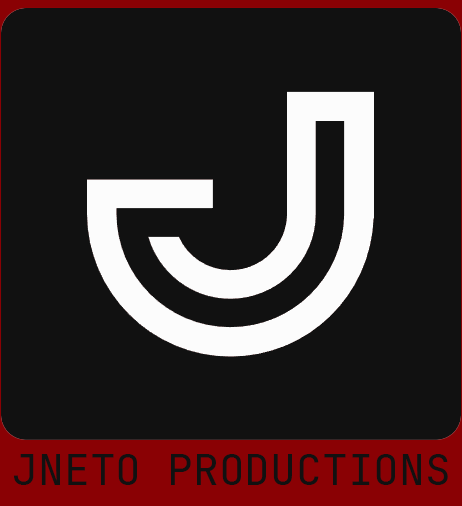
<style>
.page{position:relative;width:462px;height:506px;background:#111111}
.page>*{position:absolute;margin:0}
.t1{font:43px "JetBrainsMono-Regular";color:#111111}
</style>
<div class="page">
<p class="t1" style="left:13px;top:454px;width:435px;height:31px">JNETO PRODUCTIONS</p>
</div>
